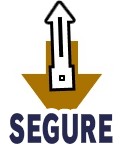
<style>
.page{position:relative;width:124px;height:150px;background:#ffffff}
.page>*{position:absolute;margin:0}
.t1{font:37.3px "RodinNTLGPro-UB";color:#272850;scale:0.62 1}
</style>
<div class="page">
<p class="t1" style="left:9px;top:113px;width:104px;height:31px">SEGURE</p>
</div>
